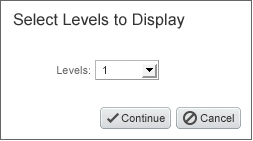
<style>
.page{position:relative;width:253px;height:141px;background:#ffffff}
.page>*{position:absolute;margin:0}
.t1{font:16px "ArialMT";letter-spacing:0.005em;color:#333333}
.t2{font:11px "ArialMT";color:#666666}
.t3{font:11px "ArialMT";color:#303030}
</style>
<div class="page">
<p class="t1" style="left:13px;top:13px;width:172px;height:16px">Select Levels to Display</p>
<p class="t2" style="left:57px;top:66px;width:33px;height:8px">Levels:</p>
<p class="t3" style="left:103px;top:66px;width:3px;height:8px">1</p>
<p class="t3" style="left:121px;top:114px;width:44px;height:8px">Continue</p>
<p class="t3" style="left:200px;top:114px;width:34px;height:8px">Cancel</p>
</div>
